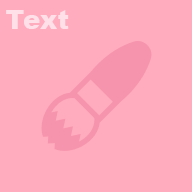
<style>
.page{position:relative;width:192px;height:192px;background:#ffacbe}
.page>*{position:absolute;margin:0}
.t1{font:26.4px "Arial-Black";color:#ffe0e8}
</style>
<div class="page">
<p class="t1" style="left:6px;top:10px;width:63px;height:19px">Text</p>
</div>
